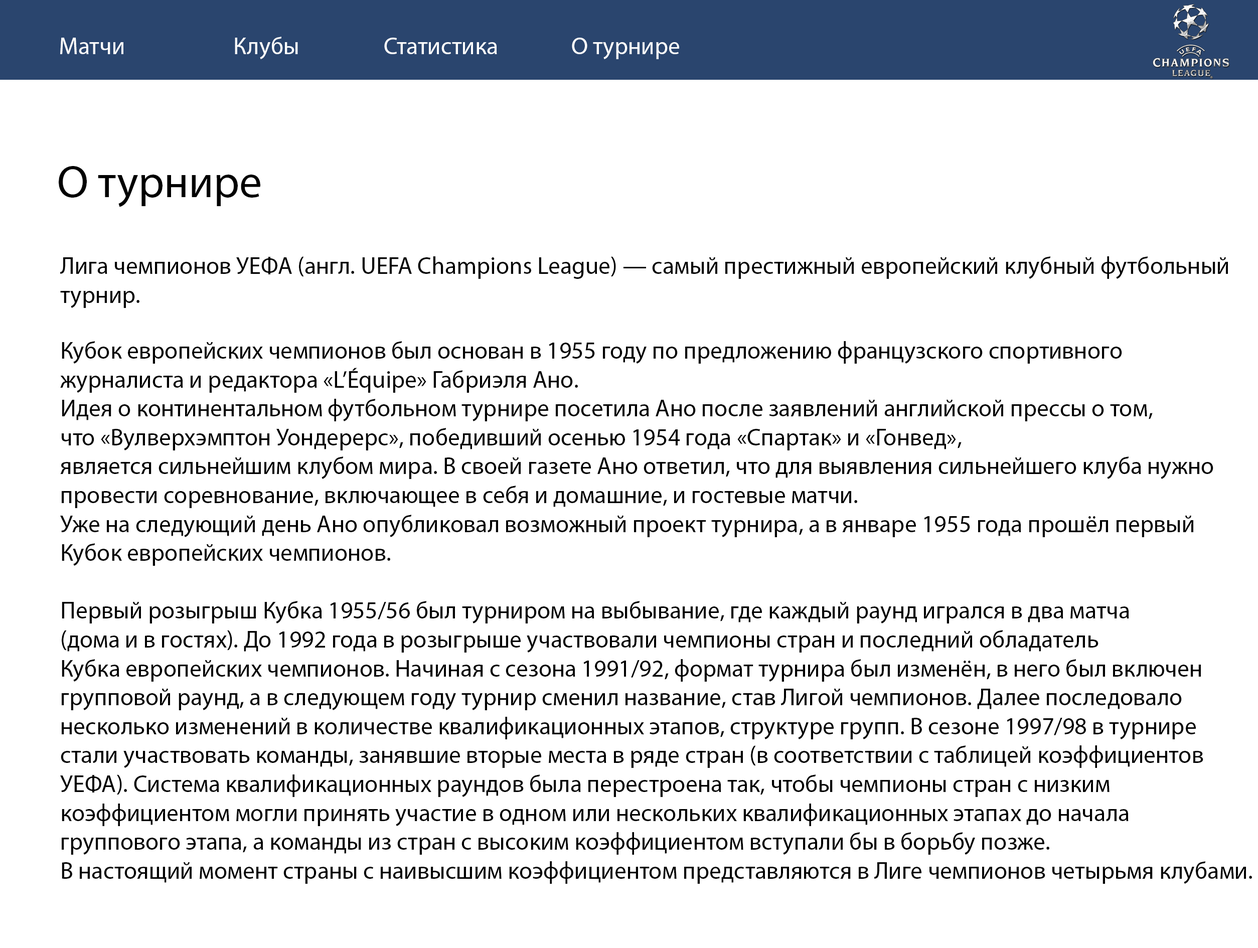
<style>
.page{position:relative;width:1258px;height:948px;background:#ffffff}
.page>*{position:absolute;margin:0}
.t1{font:24.1px "MyriadPro-Regular";color:#ffffff}
.t2{font:45.1px "MyriadPro-Regular";color:#000000}
.t3{font:24.1px "MyriadPro-Regular";color:#000000}
</style>
<div class="page">
<p class="t1" style="left:60px;top:38px;width:63px;height:16px">Матчи</p>
<p class="t1" style="left:235px;top:37px;width:63px;height:22px">Клубы</p>
<p class="t1" style="left:384px;top:38px;width:113px;height:16px">Статистика</p>
<p class="t1" style="left:572px;top:38px;width:107px;height:21px">О турнире</p>
<p class="t2" style="left:59px;top:166px;width:201px;height:41px">О турнире</p>
<p class="t3" style="left:60px;top:256px;width:1168px;height:52px">Ли́га чемпио́нов УЕФА (англ. UEFA Champions League) — самый престижный европейский клубный футбольный <br>турнир.</p>
<p class="t3" style="left:60px;top:341px;width:1192px;height:543px">Кубок европейских чемпионов был основан в 1955 году по предложению французского спортивного <br>журналиста и редактора «L’Équipe» Габриэля Ано. <br>Идея о континентальном футбольном турнире посетила Ано после заявлений английской прессы о том, <br>что «Вулверхэмптон Уондерерс», победивший осенью 1954 года «Спартак» и «Гонвед», <br>является сильнейшим клубом мира. В своей газете Ано ответил, что для выявления сильнейшего клуба нужно <br>провести соревнование, включающее в себя и домашние, и гостевые матчи. <br>Уже на следующий день Ано опубликовал возможный проект турнира, а в январе 1955 года прошёл первый <br>Кубок европейских чемпионов.<br><br>Первый розыгрыш Кубка 1955/56 был турниром на выбывание, где каждый раунд игрался в два матча <br>(дома и в гостях). До 1992 года в розыгрыше участвовали чемпионы стран и последний обладатель<br>Кубка европейских чемпионов. Начиная с сезона 1991/92, формат турнира был изменён, в него был включен <br>групповой раунд, а в следующем году турнир сменил название, став Лигой чемпионов. Далее последовало <br>несколько изменений в количестве квалификационных этапов, структуре групп. В сезоне 1997/98 в турнире <br>стали участвовать команды, занявшие вторые места в ряде стран (в соответствии с таблицей коэффициентов <br>УЕФА). Система квалификационных раундов была перестроена так, чтобы чемпионы стран с низким <br>коэффициентом могли принять участие в одном или нескольких квалификационных этапах до начала <br>группового этапа, а команды из стран с высоким коэффициентом вступали бы в борьбу позже. <br>В настоящий момент страны с наивысшим коэффициентом представляются в Лиге чемпионов четырьмя клубами.</p>
</div>
